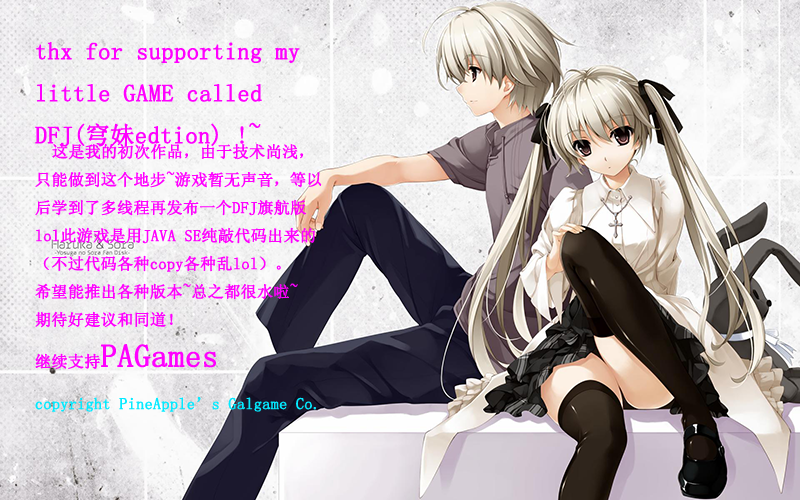
<style>
.page{position:relative;width:800px;height:500px}
.page>*{position:absolute;margin:0}
.t1{font:16px "SimSun";color:#ff00ff;font-weight:bold}
.t2{font:24px "SimSun";color:#ff00ff;font-weight:bold}
.t3{font:32px "SimSun";color:#ff00ff;font-weight:bold}
.t4{font:16px "SimSun";color:#04eaff;font-weight:bold}
</style>
<div class="page">
<p class="t1" style="left:35px;top:42px;width:287px;height:370px"><span class="t2"><br>thx for supporting my little GAME called DFJ(穹妹edtion) !~<br></span>  这是我的初次作品，由于技术尚浅，只能做到这个地步~游戏暂无声音，等以后学到了多线程再发布一个DFJ旗航版lol此游戏是用JAVA SE纯敲代码出来的（不过代码各种copy各种乱lol）。<br>希望能推出各种版本~总之都很水啦~<br>期待好建议和同道！<br>继续支持<span class="t3">PAGames<br></span><span class="t4">copyright PineApple’s Galgame Co.</span></p>
</div>
